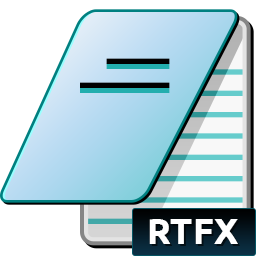
<style>
.page{position:relative;width:256px;height:256px;background:#ffffff}
.page>*{position:absolute;margin:0}
.t1{font:36px "Ubuntu-Bold";color:#ffffff}
</style>
<div class="page">
<p class="t1" style="left:149px;top:219px;width:89px;height:25px">RTFX</p>
</div>
